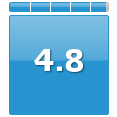
<style>
.page{position:relative;width:117px;height:117px;background:#2793cf}
.page>*{position:absolute;margin:0}
.t1{font:36px "Colaborate-Bold";color:#ffffff;text-transform:uppercase}
</style>
<div class="page">
<p class="t1" style="left:34px;top:49px;width:49px;height:23px">4.8</p>
</div>
